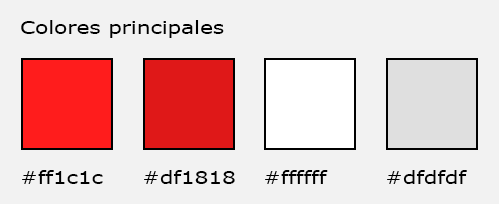
<style>
.page{position:relative;width:499px;height:204px;background:#f2f2f2}
.page>*{position:absolute;margin:0}
.t1{font:18px "MSReferenceSansSerif";color:#000000;scale:1.2 1}
</style>
<div class="page">
<p class="t1" style="left:21px;top:20px;width:203px;height:18px">Colores principales</p>
<p class="t1" style="left:22px;top:170px;width:81px;height:14px">#ff1c1c</p>
<p class="t1" style="left:144px;top:170px;width:91px;height:14px">#df1818</p>
<p class="t1" style="left:265px;top:170px;width:63px;height:14px">#ffffff</p>
<p class="t1" style="left:387px;top:170px;width:80px;height:14px">#dfdfdf</p>
</div>
